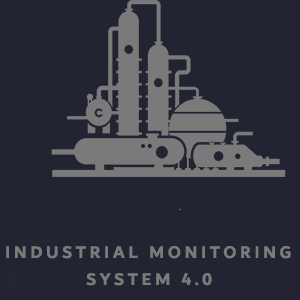
<style>
.page{position:relative;width:300px;height:300px;background:#222431}
.page>*{position:absolute;margin:0}
.t1{font:18px "Dubai-Bold";letter-spacing:0.2em;color:#7b7b7b;text-transform:uppercase}
</style>
<div class="page">
<p class="t1" style="left:6px;top:246px;width:285px;height:13px">Industrial monitoring</p>
<p class="t1" style="left:86px;top:273px;width:126px;height:13px">System 4.0</p>
</div>
